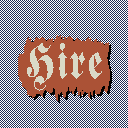
<style>
.page{position:relative;width:128px;height:128px;background:#1d2b53}
.page>*{position:absolute;margin:0}
.t1{font:50px "SchmalfetteFraktur";letter-spacing:0.035em;color:#dad9c7}
</style>
<div class="page">
<p class="t1" style="left:27px;top:43px;width:75px;height:48px">Hire</p>
</div>
